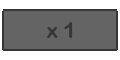
<style>
.page{position:relative;width:120px;height:60px;background:#656464}
.page>*{position:absolute;margin:0}
.t1{font:21.6px "ArialRoundedMTBold";color:#363636}
</style>
<div class="page">
<p class="t1" style="left:47px;top:22px;width:26px;height:16px">x 1</p>
</div>
